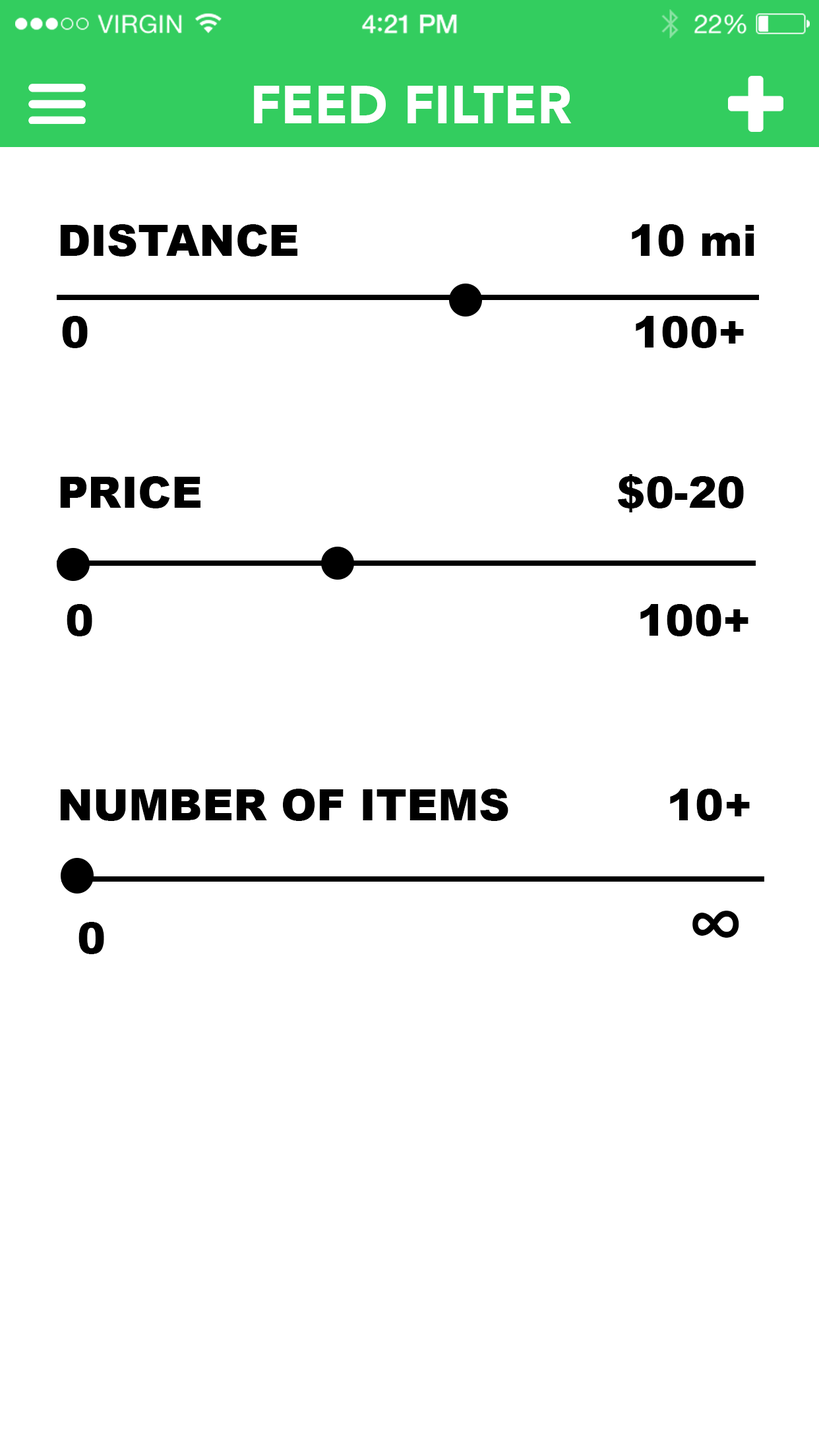
<style>
.page{position:relative;width:819px;height:1456px;background:#ffffff}
.page>*{position:absolute;margin:0}
.t1{font:52.8px "Avenir-Black";color:#ffffff}
.t2{font:42.9px "Arial-Black";color:#000000}
.t3{font:81.8px "Arial-Black";color:#000000}
</style>
<div class="page">
<p class="t1" style="left:254px;top:86px;width:318px;height:37px">FEED FILTER</p>
<p class="t2" style="left:60px;top:224px;width:694px;height:33px">DISTANCE                       10 mi</p>
<p class="t2" style="left:62px;top:316px;width:682px;height:32px">0                                      100+</p>
<p class="t2" style="left:60px;top:474px;width:684px;height:38px">PRICE                             $0-20</p>
<p class="t2" style="left:67px;top:604px;width:681px;height:32px">0                                      100+</p>
<p class="t2" style="left:60px;top:789px;width:690px;height:32px">NUMBER OF ITEMS           10+</p>
<p class="t2" style="left:78px;top:911px;width:661px;height:43px">0                                         <span class="t3">∞</span></p>
</div>
